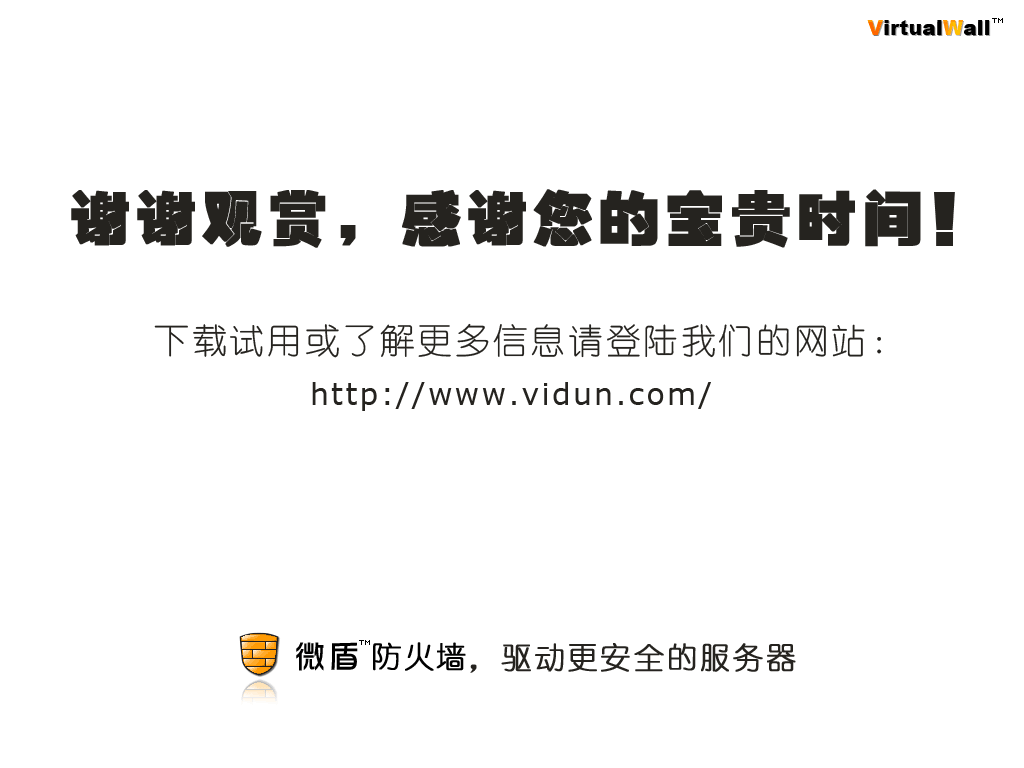
<style>
.page{position:relative;width:1024px;height:768px;background:#ffffff}
.page>*{position:absolute;margin:0}
.t1{font:60px "HYb4gj";letter-spacing:0.075em;color:#25231f;font-weight:bold}
.t2{font:35px "YouYuan";letter-spacing:0.075em;color:#25231f}
.t3{font:30px "Verdana";letter-spacing:0.075em;color:#25231f}
.t4{font:30px "YouYuan";letter-spacing:0.075em;color:#25231f;font-weight:bold}
</style>
<div class="page">
<p class="t1" style="left:71px;top:189px;width:884px;height:59px">谢谢观赏，感谢您的宝贵时间！</p>
<p class="t2" style="left:154px;top:323px;width:728px;height:35px">下载试用或了解更多信息请登陆我们的网站：</p>
<p class="t3" style="left:312px;top:382px;width:399px;height:29px">http://www.vidun.com/</p>
<p class="t4" style="left:470px;top:643px;width:326px;height:30px">，驱动更安全的服务器</p>
</div>
